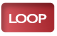
<style>
.page{position:relative;width:57px;height:36px;background:#ffffff}
.page>*{position:absolute;margin:0}
.t1{font:11.4px "DejaVuSansCondensed";letter-spacing:-0.08em;color:#ffffff;font-weight:bold;scale:1.5 1}
</style>
<div class="page">
<p class="t1" style="left:9px;top:14px;width:38px;height:9px">LOOP</p>
</div>
